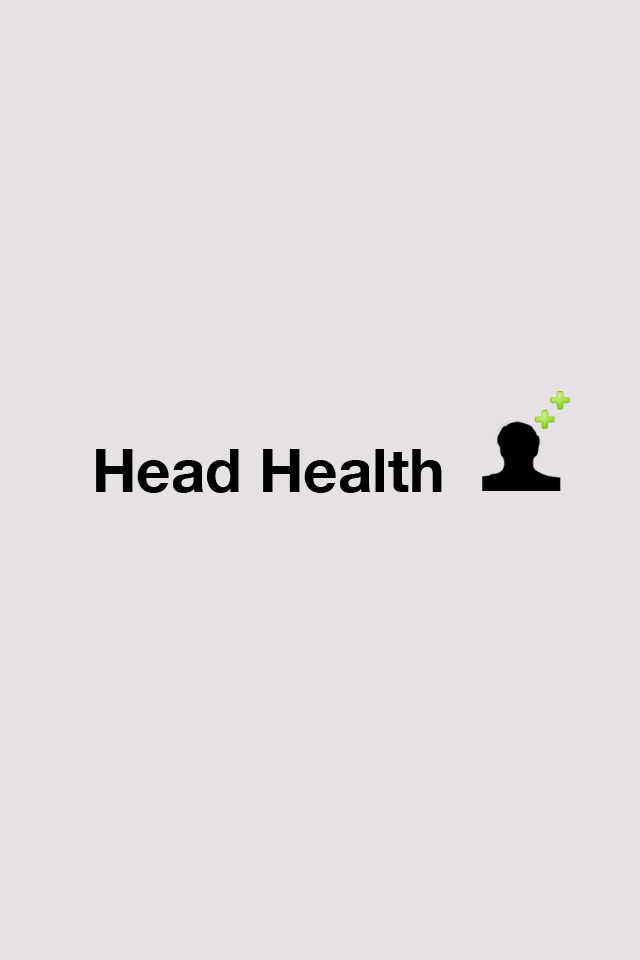
<style>
.page{position:relative;width:640px;height:960px;background:#e5e1e5}
.page>*{position:absolute;margin:0}
.t1{font:60px "HelveticaNeue-Bold";color:#000000}
</style>
<div class="page">
<p class="t1" style="left:96px;top:449px;width:346px;height:44px">Head Health</p>
</div>
